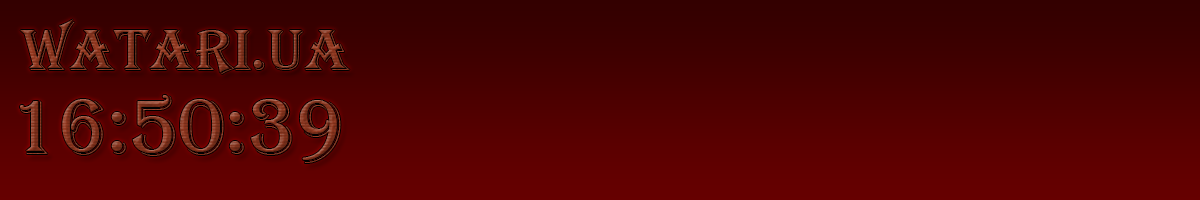
<style>
.page{position:relative;width:1200px;height:200px}
.page>*{position:absolute;margin:0}
.t1{font:60px "Algerian"}
.t2{font:81px "Algerian"}
</style>
<div class="page">
<p class="t1" style="left:20px;top:19px;width:330px;height:55px">WATARI.UA</p>
<p class="t2" style="left:20px;top:95px;width:321px;height:68px">16:50:39</p>
</div>
